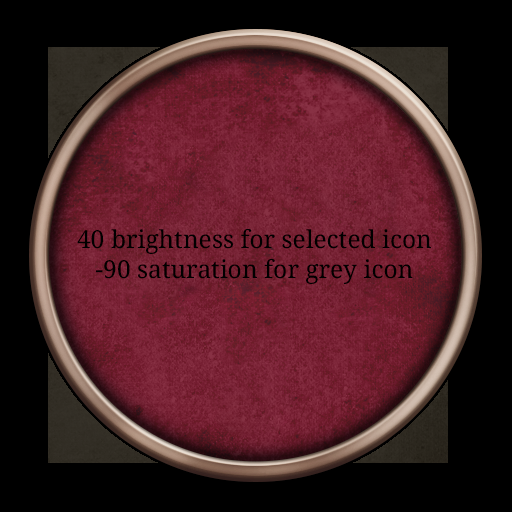
<style>
.page{position:relative;width:512px;height:512px;background:#000000}
.page>*{position:absolute;margin:0}
.t1{font:24.7px "NotoSerif";color:#000000}
</style>
<div class="page">
<p class="t1" style="left:77px;top:229px;width:354px;height:55px;text-align:center">40 brightness for selected icon<br>-90 saturation for grey icon</p>
</div>
